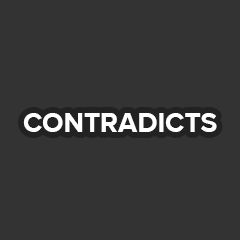
<style>
.page{position:relative;width:240px;height:240px;background:#333333}
.page>*{position:absolute;margin:0}
.t1{font:28px "ProximaNova-Bold";color:#ffffff;text-transform:uppercase}
</style>
<div class="page">
<p class="t1" style="left:23px;top:113px;width:194px;height:19px">contradicts</p>
</div>
